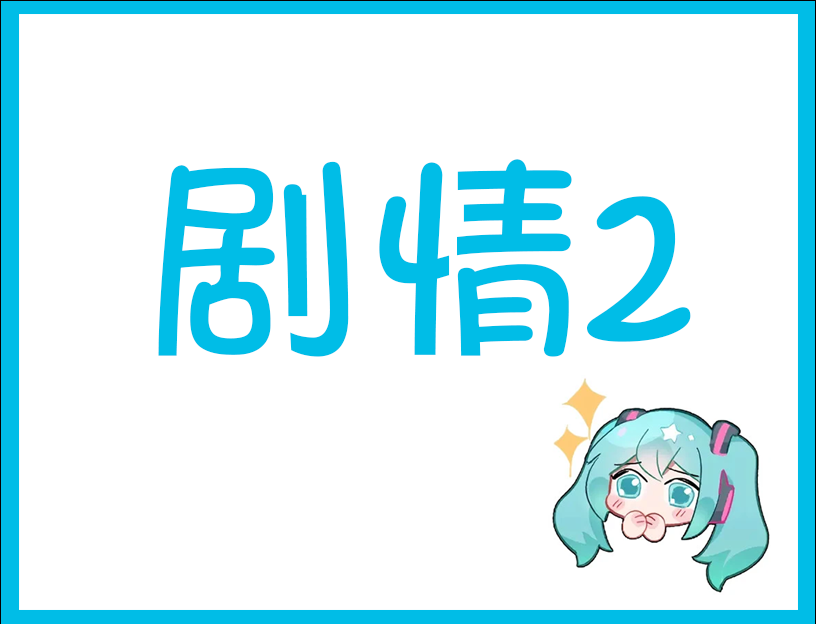
<style>
.page{position:relative;width:816px;height:624px;background:#ffffff}
.page>*{position:absolute;margin:0}
.t1{font:210.1px "¢è?";letter-spacing:0.025em;color:#00bde7}
</style>
<div class="page">
<p class="t1" style="left:158px;top:159px;width:533px;height:198px">剧情2</p>
</div>
